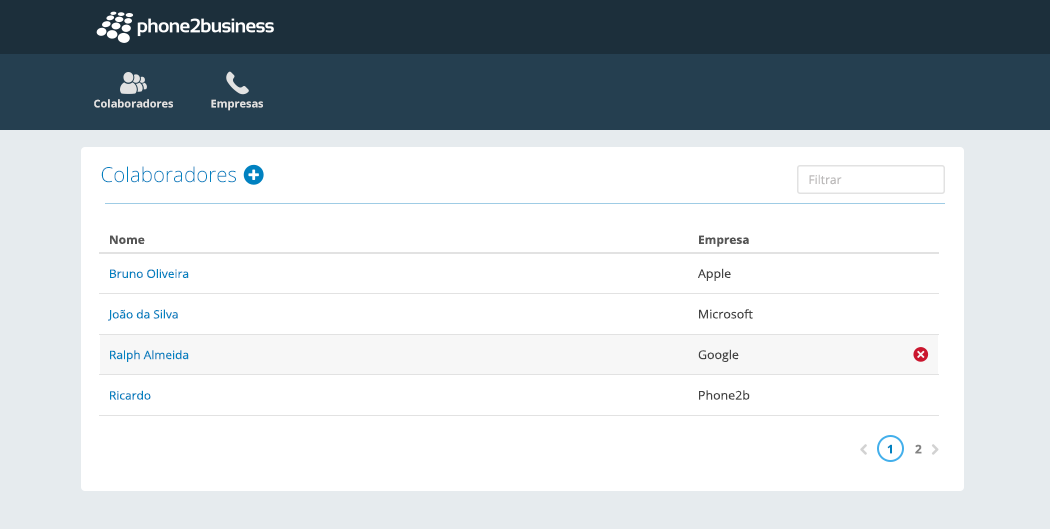
<style>
.page{position:relative;width:1050px;height:529px;background:#ffffff}
.page>*{position:absolute;margin:0}
.t1{font:11px "OpenSans-Bold";color:#e2e2e2}
.t2{font:20.5px "OpenSans-Light";color:#0081c0}
.t3{font:12px "OpenSans";color:#bcbaba}
.t4{font:11.5px "OpenSans-Bold";color:#565656;scale:1.03 1}
.t5{font:11.5px/40.6px "OpenSans";color:#0081c0;scale:1.03 1}
.t6{font:12px/40.6px "OpenSans";color:#444444;scale:1.03 1}
.t7{font:12px "OpenSans-Bold";color:#0081c0}
.t8{font:12px "OpenSans-Bold";color:#838383}
</style>
<div class="page">
<p class="t1" style="left:94px;top:99px;width:79px;height:9px">Colaboradores</p>
<p class="t1" style="left:211px;top:99px;width:52px;height:12px">Empresas</p>
<p class="t2" style="left:101px;top:166px;width:135px;height:17px">Colaboradores</p>
<p class="t3" style="left:809px;top:174px;width:33px;height:11px">Filtrar</p>
<p class="t4" style="left:110px;top:235px;width:35px;height:9px">Nome</p>
<p class="t4" style="left:699px;top:235px;width:50px;height:12px">Empresa</p>
<p class="t5" style="left:108px;top:269px;width:81px;height:131px">Bruno Oliveira<br>João da Silva<br>Ralph Almeida<br>Ricardo</p>
<p class="t6" style="left:698px;top:268px;width:55px;height:132px">Apple<br>Microsoft<br>Google<br>Phone2b</p>
<p class="t7" style="left:887px;top:444px;width:5px;height:10px">1</p>
<p class="t8" style="left:915px;top:444px;width:7px;height:10px">2</p>
</div>
